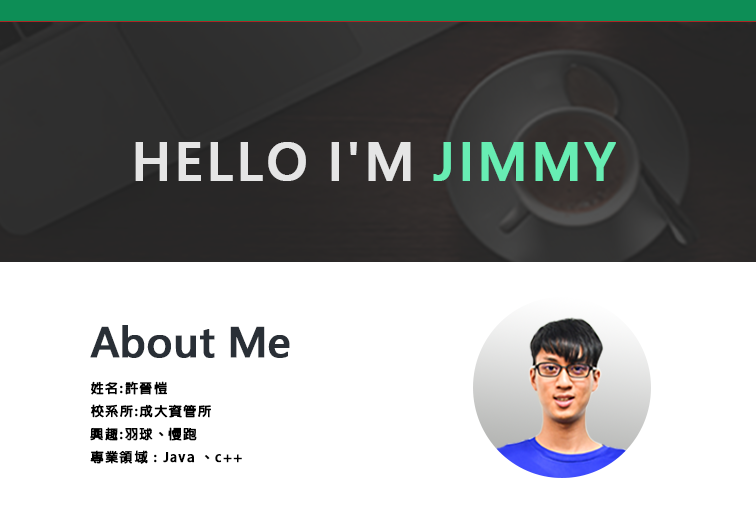
<style>
.page{position:relative;width:756px;height:523px;background:#ffffff}
.page>*{position:absolute;margin:0}
.t1{font:50px "MicrosoftJhengHeiBold";letter-spacing:0.05em;color:#e5e5e5;font-weight:bold}
.t2{font:50px "MicrosoftJhengHeiBold";letter-spacing:0.05em;color:#67edb3;font-weight:bold}
.t3{font:40px "MicrosoftJhengHeiBold";color:#292f36;font-weight:bold}
.t4{font:13px "AdobeFanHeitiStd-Bold";letter-spacing:0.1em;color:#000000;font-weight:bold}
</style>
<div class="page">
<p class="t1" style="left:135px;top:142px;width:481px;height:39px">HELLO I'M <span class="t2">JIMMY</span></p>
<p class="t3" style="left:90px;top:325px;width:200px;height:33px">About Me</p>
<p class="t4" style="left:90px;top:381px;width:152px;height:83px">姓名:許晉愷<br>校系所:成大資管所<br>興趣:羽球、慢跑<br>專業領域 : Java 、c++</p>
</div>
